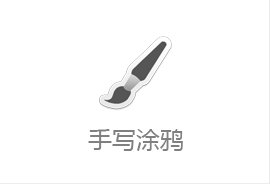
<style>
.page{position:relative;width:270px;height:184px;background:#ffffff}
.page>*{position:absolute;margin:0}
.t1{font:24px "MicrosoftYaHei";color:#808080}
</style>
<div class="page">
<p class="t1" style="left:88px;top:129px;width:95px;height:22px">手写涂鸦</p>
</div>
